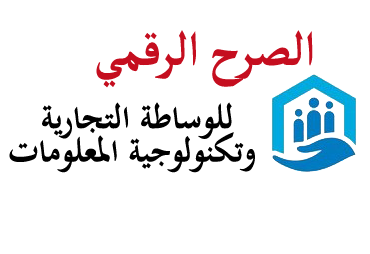
<style>
.page{position:relative;width:370px;height:254px;background:#ffffff}
.page>*{position:absolute;margin:0}
.t1{font:67.5px "MicrosoftUighur-Bold";color:#c50e1f}
.t2{font:43.2px/33.3px "TraditionalArabic-Bold";color:#000000}
</style>
<div class="page">
<p class="t1" style="left:96px;top:30px;width:217px;height:58px">الصرح الرقمي</p>
<p class="t2" style="left:9px;top:102px;width:246px;height:71px;text-align:center">للوساطة التجارية <br>وتكنولوجية المعلومات</p>
</div>
